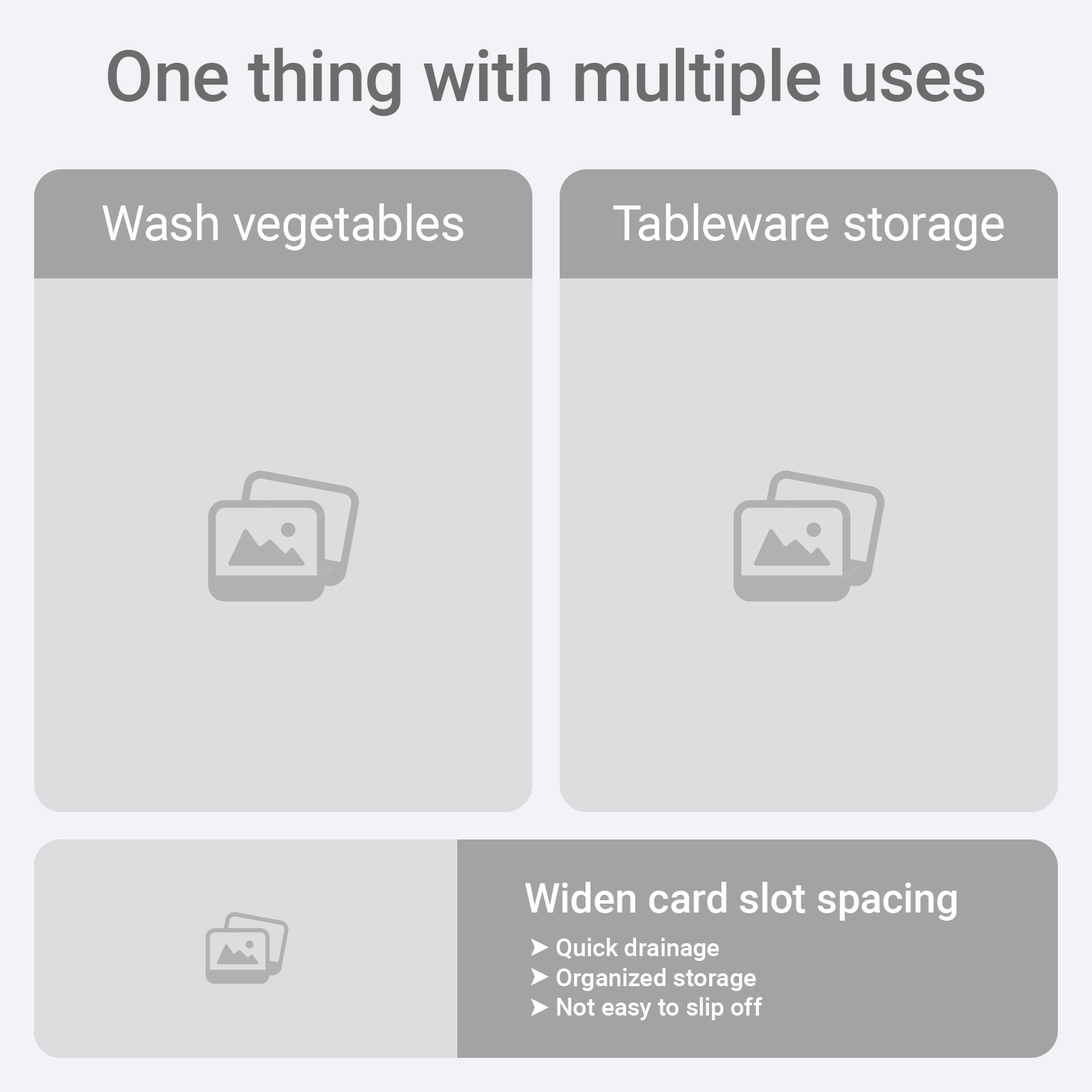
<style>
.page{position:relative;width:1092px;height:1092px;background:#dcdddf}
.page>*{position:absolute;margin:0}
.t1{font:71px "Roboto-Medium";color:#6c6c6c}
.t2{font:49.1px "Roboto-Regular";color:#ffffff}
.t3{font:40.9px "Roboto-Medium";color:#ffffff}
.t4{font:24.6px "Roboto-Medium";color:#ffffff}
</style>
<div class="page">
<p class="t1" style="left:108px;top:48px;width:877px;height:68px">One thing with multiple uses</p>
<p class="t2" style="left:102px;top:203px;width:361px;height:47px">Wash vegetables</p>
<p class="t2" style="left:613px;top:203px;width:391px;height:47px">Tableware storage</p>
<p class="t3" style="left:525px;top:882px;width:432px;height:39px">Widen card slot spacing</p>
<p class="t4" style="left:556px;top:938px;width:206px;height:82px">Quick drainage<br>Organized storage<br>Not easy to slip off</p>
</div>
